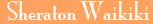
<style>
.page{position:relative;width:153px;height:24px;background:#ffa15f}
.page>*{position:absolute;margin:0}
.t1{font:24px "MonaLisaSolidITCTT";color:#fefefe}
</style>
<div class="page">
<p class="t1" style="left:7px;top:1px;width:143px;height:20px">Sheraton Waikiki</p>
</div>
